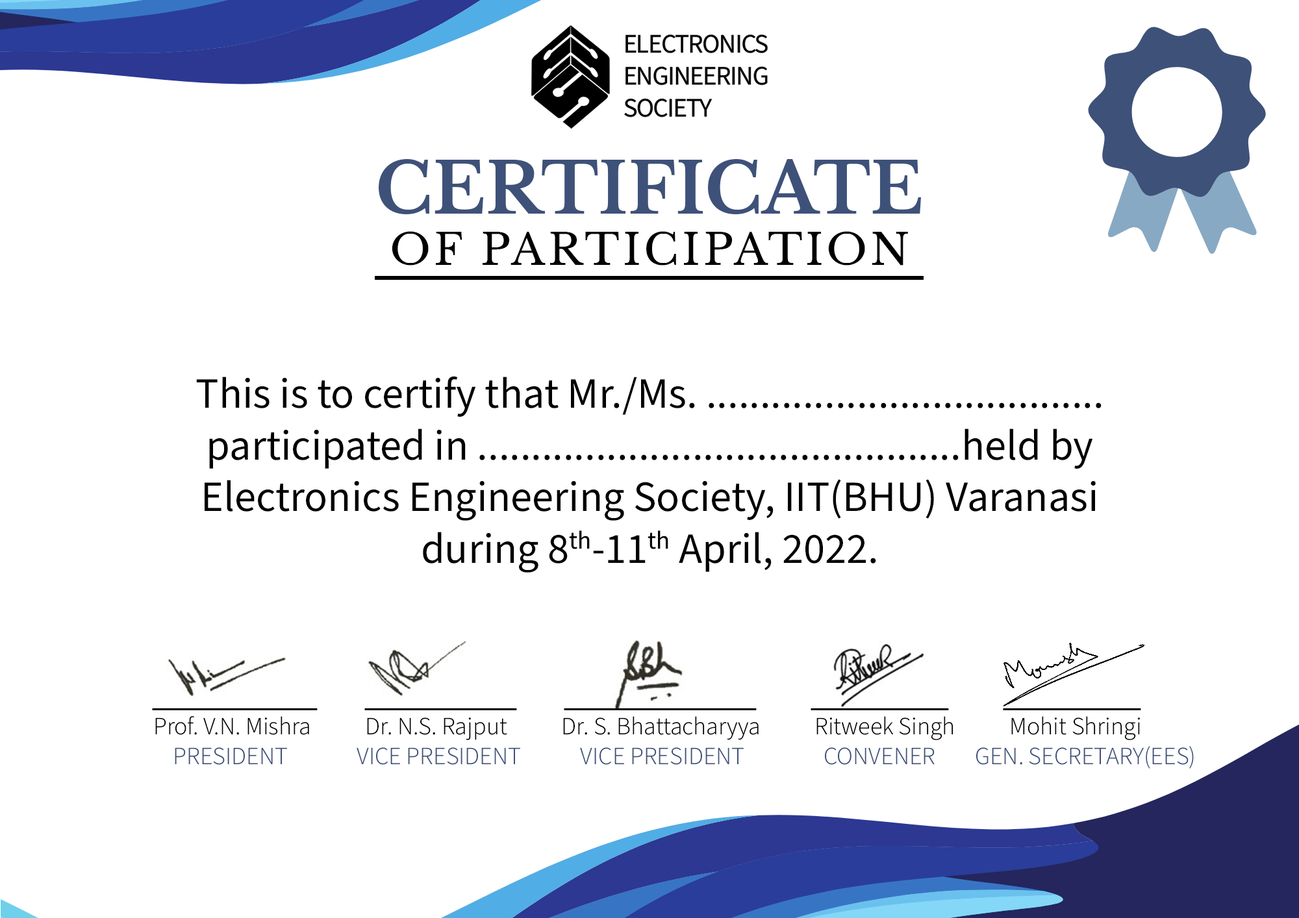
<style>
.page{position:relative;width:1299px;height:918px;background:#ffffff}
.page>*{position:absolute;margin:0}
.t1{font:43.2px "LibreBaskerville-Regular";letter-spacing:0.08em;color:#000000}
.t2{font:69.4px "LibreBaskerville-Bold";color:#3e5179}
.t3{font:43.2px "SourceSansRoman-Regular";color:#000000}
.t4{font:24.7px "SourceSansRoman-Light";color:#000000}
.t5{font:24.7px "ArialMT";color:#000000}
.t6{font:24.7px "SourceSansRoman-Light";color:#3e5179}
</style>
<div class="page">
<p class="t1" style="left:379px;top:159px;width:542px;height:107px;text-align:center"><span class="t2">CERTIFICATE<br></span>OF PARTICIPATION</p>
<p class="t3" style="left:196px;top:376px;width:905px;height:197px;text-align:center">This is to certify that Mr./Ms. .....................................<br>participated in .............................................held by <br>Electronics Engineering Society, IIT(BHU) Varanasi<br>during 8th-11th April, 2022.</p>
<p class="t4" style="left:152px;top:708px;width:1042px;height:61px"><span class="t5">          ____________       ___________       ______________        __________        __________<br></span>              Prof. V.N. Mishra           Dr. N.S. Rajput           Dr. S. Bhattacharyya           Ritweek Singh           Mohit Shringi<br>                  <span class="t6">PRESIDENT              VICE PRESIDENT            VICE PRESIDENT                CONVENER        GEN. SECRETARY(EES)</span></p>
</div>
